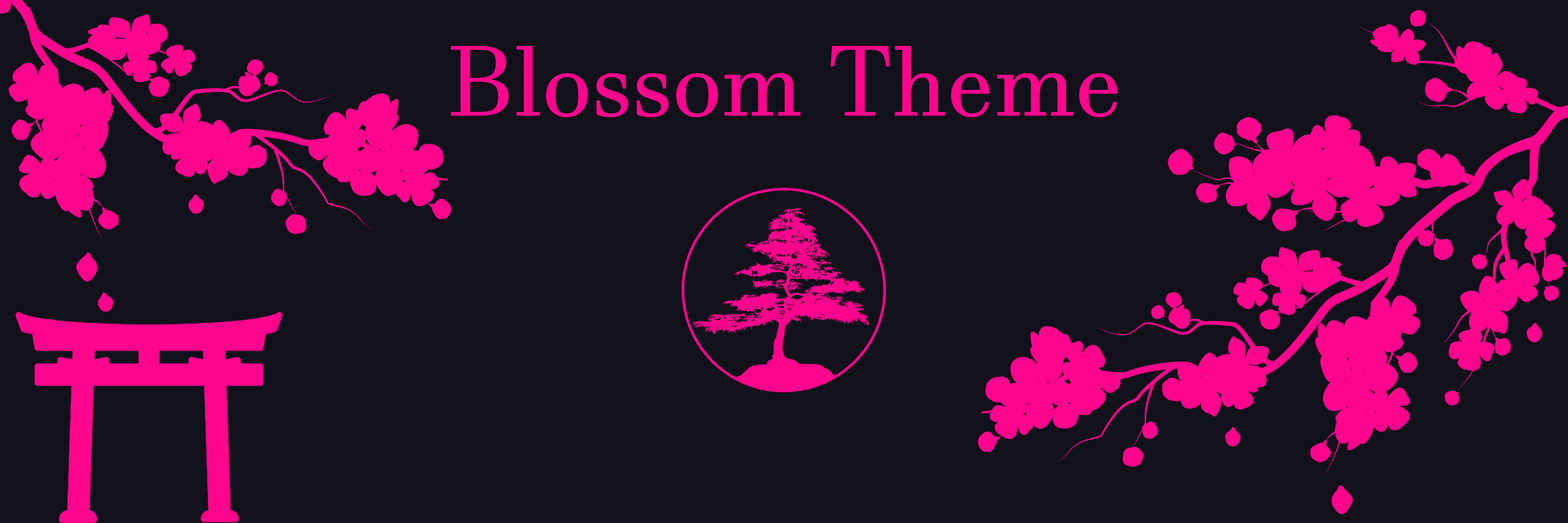
<style>
.page{position:relative;width:1568px;height:523px;background:#10111b}
.page>*{position:absolute;margin:0}
.t1{font:98.1px "JavaneseText";color:#ff058d}
</style>
<div class="page">
<p class="t1" style="left:451px;top:45px;width:667px;height:72px">Blossom Theme</p>
</div>
